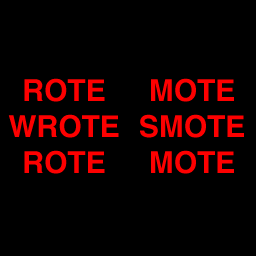
<style>
.page{position:relative;width:256px;height:256px;background:#000000}
.page>*{position:absolute;margin:0}
.t1{font:30px "Helvetica-Bold";color:#fd0000}
</style>
<div class="page">
<p class="t1" style="left:8px;top:78px;width:111px;height:96px;text-align:center">ROTE<br>WROTE<br>ROTE</p>
<p class="t1" style="left:140px;top:78px;width:104px;height:96px;text-align:center">MOTE<br>SMOTE<br>MOTE</p>
</div>
